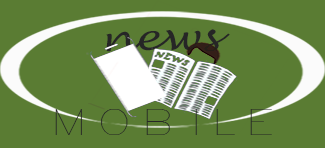
<style>
.page{position:relative;width:325px;height:148px;background:#5a7c33}
.page>*{position:absolute;margin:0}
.t1{font:34.7px "LucidaHandwriting-Italic";color:#262626;scale:1.31 1}
.t2{font:34.6px "Simplex";letter-spacing:0.2em;color:#262626;scale:1.31 1}
</style>
<div class="page">
<p class="t1" style="left:106px;top:29px;width:124px;height:23px;rotate:-1deg">news</p>
<p class="t2" style="left:55px;top:109px;width:217px;height:26px">MOBILE</p>
</div>
